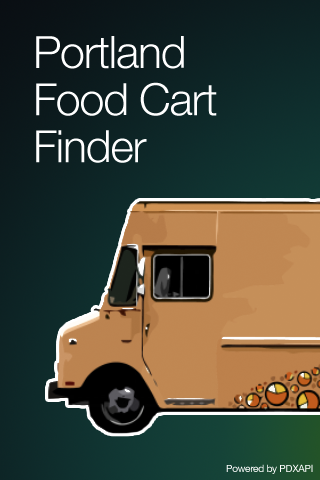
<style>
.page{position:relative;width:320px;height:480px}
.page>*{position:absolute;margin:0}
.t1{font:44.7px/47.1px "HelveticaNeue-Light";letter-spacing:-0.025em;color:#ffffff}
.t2{font:10px "HelveticaNeue";letter-spacing:-0.025em;color:#ffffff}
</style>
<div class="page">
<p class="t1" style="left:36px;top:36px;width:181px;height:127px">Portland<br>Food Cart<br>Finder</p>
<p class="t2" style="left:226px;top:464px;width:87px;height:10px">Powered by PDXAPI</p>
</div>
